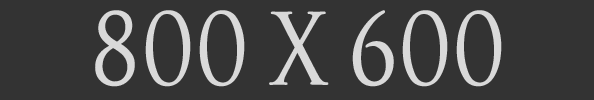
<style>
.page{position:relative;width:594px;height:100px;background:#333333}
.page>*{position:absolute;margin:0}
.t1{font:95.5px "SpaceandAstronomy";color:#d9d9d9;scale:0.87 1}
</style>
<div class="page">
<p class="t1" style="left:95px;top:10px;width:407px;height:77px">800 x 600</p>
</div>
